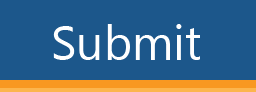
<style>
.page{position:relative;width:256px;height:92px;background:#1c578b}
.page>*{position:absolute;margin:0}
.t1{font:48px "SegoeUI";color:#ffffff}
</style>
<div class="page">
<p class="t1" style="left:53px;top:24px;width:147px;height:36px">Submit</p>
</div>
